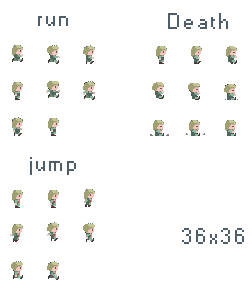
<style>
.page{position:relative;width:252px;height:288px;background:#ffffff}
.page>*{position:absolute;margin:0}
.t1{font:20px "Small Fonts";letter-spacing:0.1em;color:#4f5e6b;scale:0.92 1}
</style>
<div class="page">
<p class="t1" style="left:38px;top:16px;width:30px;height:10px">run</p>
<p class="t1" style="left:168px;top:13px;width:60px;height:16px">Death</p>
<p class="t1" style="left:30px;top:157px;width:46px;height:18px">jump</p>
<p class="t1" style="left:182px;top:228px;width:62px;height:16px">36x36</p>
</div>
